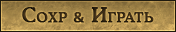
<style>
.page{position:relative;width:176px;height:32px}
.page>*{position:absolute;margin:0}
.t1{font:19.5px "CooperMediumCBT";letter-spacing:0.04em;color:#332512;font-variant:small-caps;font-weight:bold}
.t2{font:19.5px "Corbel";letter-spacing:0.04em;color:#332512;font-variant:small-caps;font-weight:bold}
</style>
<div class="page">
<p class="t1" style="left:22px;top:7px;width:132px;height:16px">Сохр <span class="t2">&amp;</span> Играть</p>
</div>
